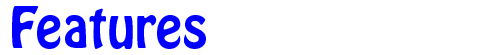
<style>
.page{position:relative;width:500px;height:55px;background:#ffffff}
.page>*{position:absolute;margin:0}
.t1{font:50px "HoboStd";color:#0000ff}
</style>
<div class="page">
<p class="t1" style="left:12px;top:6px;width:194px;height:43px">Features</p>
</div>
